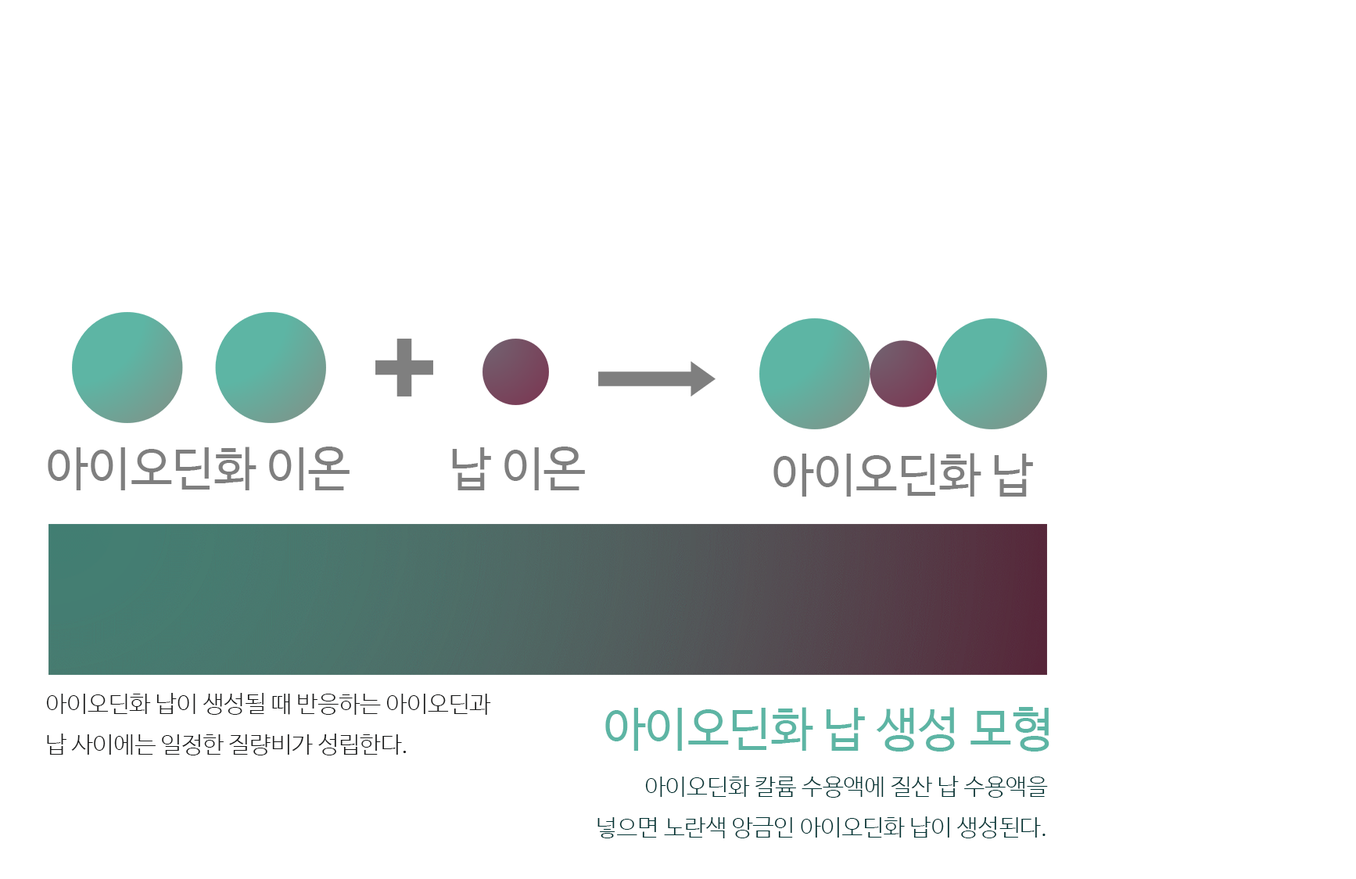
<style>
.page{position:relative;width:1356px;height:879px;background:#ffffff}
.page>*{position:absolute;margin:0}
.t1{font:46.9px "NanumBarunGothic";color:#7f7f7f}
.t2{font:23.5px "NanumBarunGothicLight";color:#191a1a}
.t3{font:46.9px "NanumBarunGothic";color:#5db5a4}
.t4{font:23.5px "NanumBarunGothicLight";color:#003333}
</style>
<div class="page">
<p class="t1" style="left:48px;top:447px;width:302px;height:43px">아이오딘화 이온</p>
<p class="t1" style="left:452px;top:447px;width:133px;height:43px">납 이온</p>
<p class="t1" style="left:774px;top:453px;width:259px;height:44px">아이오딘화 납</p>
<p class="t2" style="left:46px;top:693px;width:445px;height:63px">아이오딘화 납이 생성될 때 반응하는 아이오딘과<br>납 사이에는 일정한 질량비가 성립한다.</p>
<p class="t3" style="left:605px;top:707px;width:445px;height:45px">아이오딘화 납 생성 모형</p>
<p class="t4" style="left:598px;top:776px;width:450px;height:63px;text-align:right">아이오딘화 칼륨 수용액에 질산 납 수용액을<br> 넣으면 노란색 앙금인 아이오딘화 납이 생성된다.</p>
</div>
